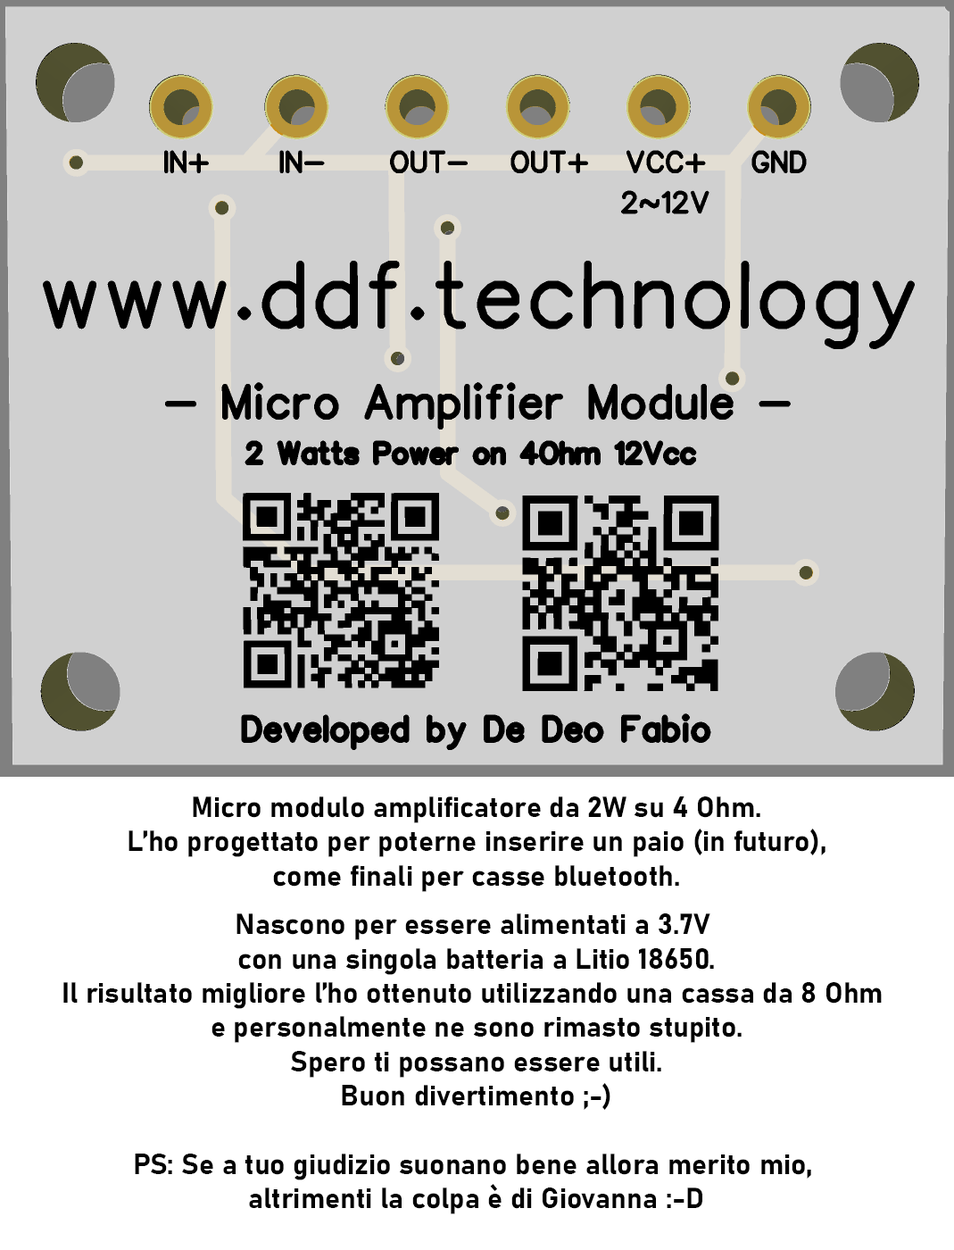
<style>
.page{position:relative;width:954px;height:1250px;background:#d0d0d0}
.page>*{position:absolute;margin:0}
.t1{font:28.6px "Bahnschrift-Bold";color:#000000}
</style>
<div class="page">
<p class="t1" style="left:63px;top:796px;width:819px;height:418px;text-align:center">Micro modulo amplificatore da 2W su 4 Ohm.<br>L’ho progettato per poterne inserire un paio (in futuro),<br>come finali per casse bluetooth.<br> <br>Nascono per essere alimentati a 3.7V <br>con una singola batteria a Litio 18650.<br>Il risultato migliore l’ho ottenuto utilizzando una cassa da 8 Ohm <br>e personalmente ne sono rimasto stupito.<br>Spero ti possano essere utili.<br>Buon divertimento ;-)<br><br>PS: Se a tuo giudizio suonano bene allora merito mio, <br>altrimenti la colpa è di Giovanna :-D</p>
</div>
